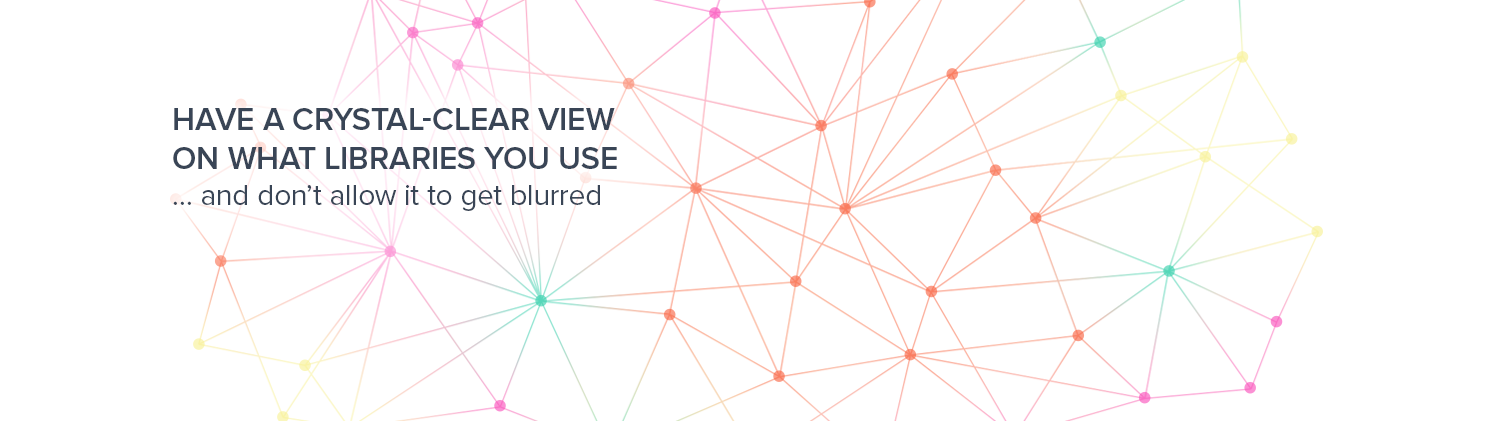
<style>
.page{position:relative;width:1500px;height:421px;background:#ffffff}
.page>*{position:absolute;margin:0}
.t1{font:32px "ProximaNova-Semibold";color:#394556;text-transform:uppercase}
.t2{font:30px "ProximaNova-Regular";color:#394556}
</style>
<div class="page">
<p class="t1" style="left:173px;top:108px;width:444px;height:103px">Have a crystal-clear view on what libraries you use<br><span class="t2">… and don’t allow it to get blurred</span></p>
</div>
